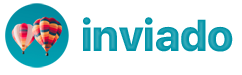
<style>
.page{position:relative;width:242px;height:75px;background:#ffffff}
.page>*{position:absolute;margin:0}
.t1{font:44.3px "SFProDisplay-Heavy";color:#0194a8}
</style>
<div class="page">
<p class="t1" style="left:83px;top:17px;width:150px;height:35px">inviado</p>
</div>
